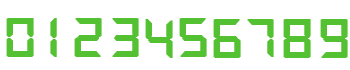
<style>
.page{position:relative;width:350px;height:70px;background:#ffffff}
.page>*{position:absolute;margin:0}
.t1{font:60px "DS-Digital";letter-spacing:0.05em;color:#54c132;font-weight:bold;scale:1.1 1}
</style>
<div class="page">
<p class="t1" style="left:6px;top:18px;width:28px;height:39px">0</p>
<p class="t1" style="left:50px;top:18px;width:7px;height:39px">1</p>
<p class="t1" style="left:74px;top:18px;width:28px;height:39px">2</p>
<p class="t1" style="left:112px;top:18px;width:27px;height:39px">3</p>
<p class="t1" style="left:145px;top:19px;width:28px;height:39px">4</p>
<p class="t1" style="left:179px;top:18px;width:28px;height:39px">5</p>
<p class="t1" style="left:213px;top:19px;width:28px;height:39px">6</p>
<p class="t1" style="left:247px;top:19px;width:27px;height:38px">7</p>
<p class="t1" style="left:283px;top:19px;width:28px;height:39px">8</p>
<p class="t1" style="left:320px;top:19px;width:28px;height:39px">9</p>
</div>
